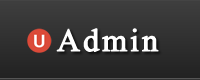
<style>
.page{position:relative;width:200px;height:80px}
.page>*{position:absolute;margin:0}
.t1{font:32px "TimesNewRomanPSMT";letter-spacing:0.068em;color:#ffffff;font-weight:bold}
</style>
<div class="page">
<p class="t1" style="left:56px;top:28px;width:103px;height:24px">Admin</p>
</div>
